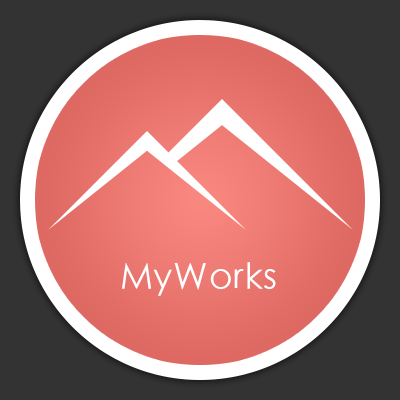
<style>
.page{position:relative;width:400px;height:400px;background:#333333}
.page>*{position:absolute;margin:0}
.t1{font:36px "STHeiti";letter-spacing:0.02em;color:#ffffff}
</style>
<div class="page">
<p class="t1" style="left:122px;top:262px;width:154px;height:34px">MyWorks</p>
</div>
